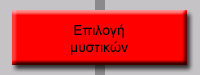
<style>
.page{position:relative;width:200px;height:75px;background:#ff0000}
.page>*{position:absolute;margin:0}
.t1{font:14px "ArialMT";color:#000000}
</style>
<div class="page">
<p class="t1" style="left:71px;top:24px;width:57px;height:31px;text-align:center">Επιλογή<br>μυστικών</p>
</div>
